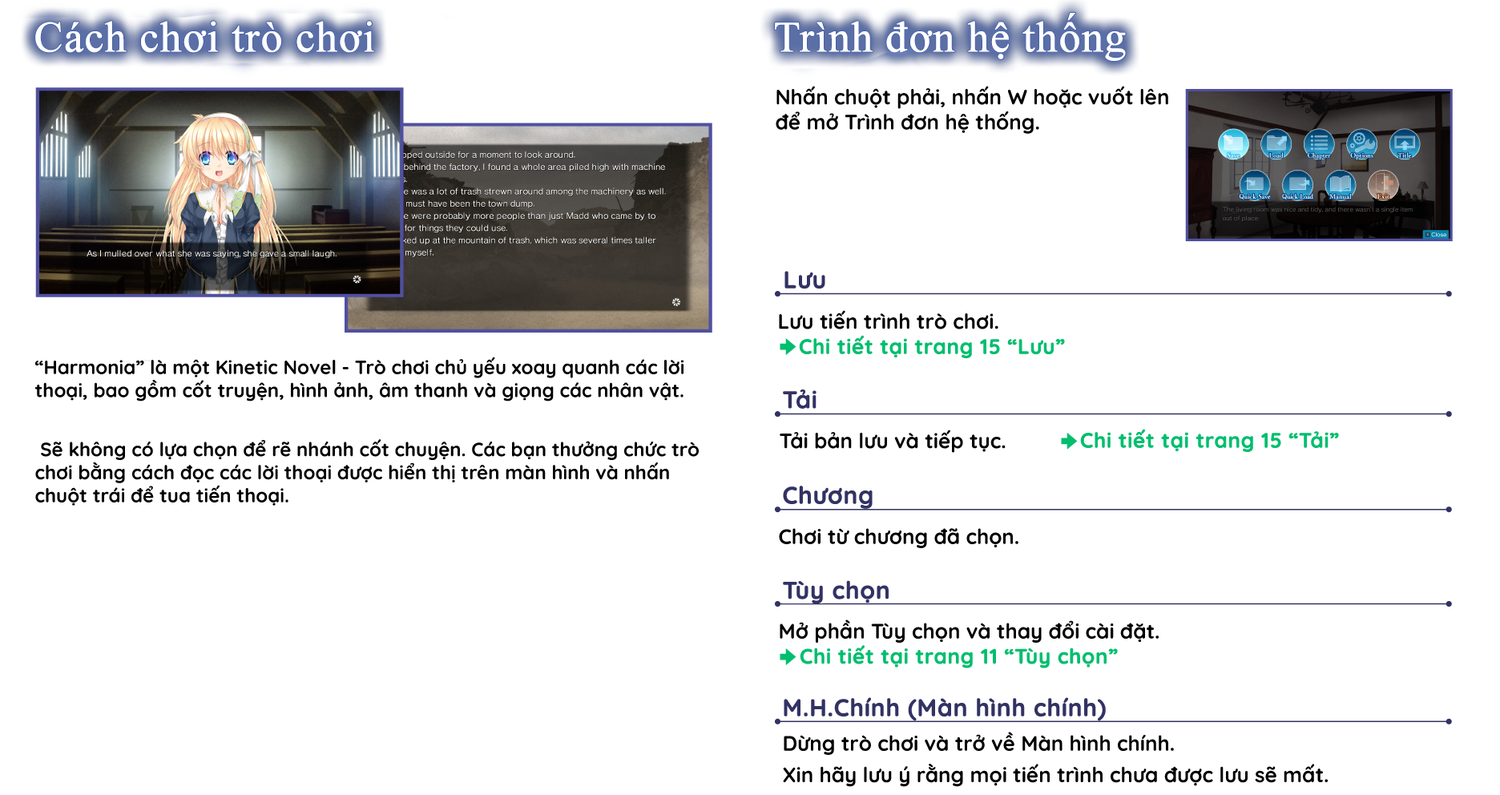
<style>
.page{position:relative;width:1500px;height:795px;background:#ffffff}
.page>*{position:absolute;margin:0}
.t1{font:43.3px "TimesNewRomanPSMT";color:#ffffff;font-weight:bold}
.t2{font:20.8px "Quicksand-Bold";color:#000000}
.t3{font:24px "Quicksand-Bold";color:#323264;font-weight:bold}
.t4{font:20.8px "Quicksand-Bold";color:#00be6e;font-weight:bold}
.t5{font:19.2px "Quicksand-Bold";color:#000000}
</style>
<div class="page">
<p class="t1" style="left:775px;top:13px;width:351px;height:48px">Trình đơn hệ thống</p>
<p class="t1" style="left:775px;top:13px;width:351px;height:48px">Trình đơn hệ thống</p>
<p class="t1" style="left:35px;top:21px;width:339px;height:32px">Cách chơi trò chơi</p>
<p class="t1" style="left:35px;top:21px;width:339px;height:32px">Cách chơi trò chơi</p>
<p class="t2" style="left:776px;top:86px;width:392px;height:48px">Nhấn chuột phải, nhấn W hoặc vuốt lên để mở Trình đơn hệ thống.</p>
<p class="t3" style="left:784px;top:271px;width:41px;height:18px">Lưu</p>
<p class="t2" style="left:779px;top:310px;width:219px;height:19px">Lưu tiến trình trò chơi.</p>
<p class="t4" style="left:799px;top:335px;width:266px;height:23px">Chi tiết tại trang 15 “Lưu”</p>
<p class="t5" style="left:34px;top:357px;width:665px;height:149px">“Harmonia” là một Kinetic Novel - Trò chơi chủ yếu xoay quanh các lời thoại, bao gồm cốt truyện, hình ảnh, âm thanh và giọng các nhân vật.<br><br> Sẽ không có lựa chọn để rẽ nhánh cốt chuyện. Các bạn thưởng chức trò chơi bằng cách đọc các lời thoại được hiển thị trên màn hình và nhấn chuột trái để tua tiến thoại.</p>
<p class="t3" style="left:783px;top:389px;width:34px;height:20px">Tải</p>
<p class="t2" style="left:780px;top:430px;width:226px;height:23px">Tải bản lưu và tiếp tục.</p>
<p class="t4" style="left:1080px;top:429px;width:259px;height:23px">Chi tiết tại trang 15 “Tải”</p>
<p class="t3" style="left:783px;top:486px;width:90px;height:23px">Chương</p>
<p class="t2" style="left:779px;top:528px;width:239px;height:20px">Chơi từ chương đã chọn.</p>
<p class="t3" style="left:783px;top:580px;width:106px;height:24px">Tùy chọn</p>
<p class="t2" style="left:780px;top:619px;width:379px;height:24px">Mở phần Tùy chọn và thay đổi cài đặt.</p>
<p class="t4" style="left:800px;top:645px;width:318px;height:23px">Chi tiết tại trang 11 “Tùy chọn”</p>
<p class="t3" style="left:784px;top:697px;width:322px;height:24px">M.H.Chính (Màn hình chính)</p>
<p class="t2" style="left:783px;top:732px;width:545px;height:55px">Dừng trò chơi và trở về Màn hình chính.<br>Xin hãy lưu ý rằng mọi tiến trình chưa được lưu sẽ mất.</p>
</div>
